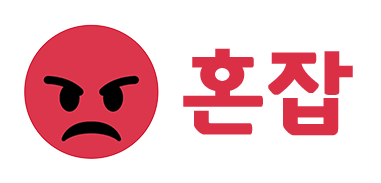
<style>
.page{position:relative;width:381px;height:183px;background:#ffffff}
.page>*{position:absolute;margin:0}
.t1{font:90px "GodoB";color:#db2f46;font-weight:bold}
</style>
<div class="page">
<p class="t1" style="left:183px;top:48px;width:170px;height:88px">혼잡</p>
</div>
